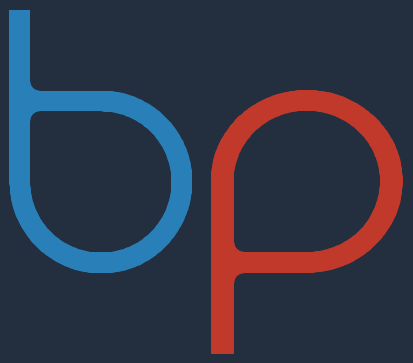
<style>
.page{position:relative;width:413px;height:363px;background:#232f3f}
.page>*{position:absolute;margin:0}
.t1{font:450px "REZ"}
.t2{font:450px "REZ";scale:1.05 1}
</style>
<div class="page">
<p class="t1" style="left:0px;top:0px;width:202px;height:283px">b</p>
<p class="t2" style="left:201px;top:80px;width:212px;height:284px">p</p>
</div>
